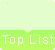
<style>
.page{position:relative;width:55px;height:50px;background:#e4fdcc}
.page>*{position:absolute;margin:0}
.t1{font:12px "ArialMT";letter-spacing:0.1em;color:#ffffff}
</style>
<div class="page">
<p class="t1" style="left:2px;top:34px;width:52px;height:14px">Top List</p>
</div>
